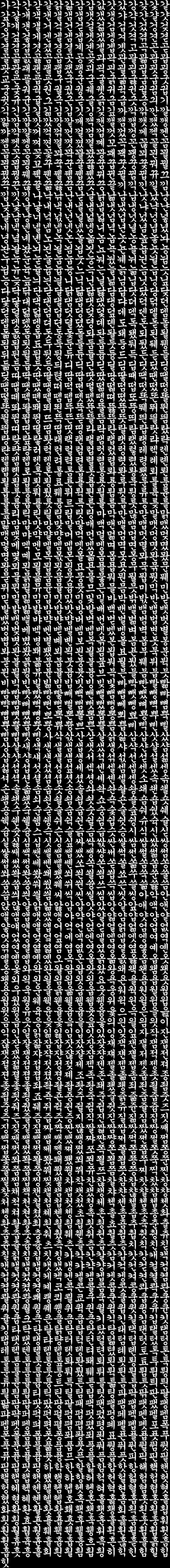
<style>
.page{position:relative;width:170px;height:1568px;background:#000000}
.page>*{position:absolute;margin:0}
.t1{font:10.6px/10.6px "Gungsuh";color:#ffffff}
</style>
<div class="page">
<p class="t1" style="left:0px;top:0px;width:170px;height:1568px">가각간갇갈갉갊감갑값갓갔강갖갗같<br>갚갛개객갠갤갬갭갯갰갱갸갹갼걀걋<br>걍걔걘걜거걱건걷걸걺검겁것겄겅겆<br>겉겊겋게겐겔겜겝겟겠겡겨격겪견겯<br>결겸겹겻겼경곁계곈곌곕곗고곡곤곧<br>골곪곬곯곰곱곳공곶과곽관괄괆괌괍<br>괏광괘괜괠괩괬괭괴괵괸괼굄굅굇굉<br>교굔굘굡굣구국군굳굴굵굶굻굼굽굿<br>궁궂궈궉권궐궜궝궤궷귀귁귄귈귐귑<br>귓규균귤그극근귿글긁금급긋긍긔기<br>긱긴긷길긺김깁깃깅깆깊까깍깎깐깔<br>깖깜깝깟깠깡깥깨깩깬깰깸깹깻깼깽<br>꺄꺅꺌꺼꺽꺾껀껄껌껍껏껐껑께껙껜<br>껨껫껭껴껸껼꼇꼈꼍꼐꼬꼭꼰꼲꼴꼼<br>꼽꼿꽁꽂꽃꽈꽉꽐꽜꽝꽤꽥꽹꾀꾄꾈<br>꾐꾑꾕꾜꾸꾹꾼꿀꿇꿈꿉꿋꿍꿎꿔꿜<br>꿨꿩꿰꿱꿴꿸뀀뀁뀄뀌뀐뀔뀜뀝뀨끄<br>끅끈끊끌끎끓끔끕끗끙끝끼끽낀낄낌<br>낍낏낑나낙낚난낟날낡낢남납낫났낭<br>낮낯낱낳내낵낸낼냄냅냇냈냉냐냑냔<br>냘냠냥너넉넋넌널넒넓넘넙넛넜넝넣<br>네넥넨넬넴넵넷넸넹녀녁년녈념녑녔<br>녕녘녜녠노녹논놀놂놈놉놋농높놓놔<br>놘놜놨뇌뇐뇔뇜뇝뇟뇨뇩뇬뇰뇹뇻뇽<br>누눅눈눋눌눔눕눗눙눠눴눼뉘뉜뉠뉨<br>뉩뉴뉵뉼늄늅늉느늑는늘늙늚늠늡늣<br>능늦늪늬늰늴니닉닌닐닒님닙닛닝닢<br>다닥닦단닫달닭닮닯닳담답닷닸당닺<br>닻닿대댁댄댈댐댑댓댔댕댜더덕덖던<br>덛덜덞덟덤덥덧덩덪덫덮데덱덴델뎀<br>뎁뎃뎄뎅뎌뎐뎔뎠뎡뎨뎬도독돈돋돌<br>돎돐돔돕돗동돛돝돠돤돨돼됐되된될<br>됨됩됫됴두둑둔둘둠둡둣둥둬뒀뒈뒝<br>뒤뒨뒬뒵뒷뒹듀듄듈듐듕드득든듣들<br>듦듬듭듯등듸디딕딘딛딜딤딥딧딨딩<br>딪따딱딴딸텭땀땁땃땄땅땋때땍땐땔<br>땜땝땟땠땡떠떡떤떨떪떫떰떱떳떴떵<br>떻떼떽뗀뗄뗌뗍뗏뗐뗑뗘뗬또똑똔똘<br>똥똬똴뙈뙤뙨뚜뚝뚠뚤뚫뚬뚱뛔뛰뛴<br>뛸뜀뜁뜅뜨뜩뜬뜯뜰뜸뜹뜻띄띈띌띔<br>띕띠띤띨띰띱띳띵라락란랄람랍랏랐<br>랑랒랖랗퇏래랙랜랠램랩랫랬랭랴략<br>랸럇량러럭런럴럼럽럿렀렁렇레렉렌<br>렐렘렙렛렝려력련렬렴렵렷렸령례롄<br>롑롓로록론롤롬롭롯롱롸롼뢍뢨뢰뢴<br>뢸룀룁룃룅료룐룔룝룟룡루룩룬룰룸<br>룹룻룽뤄뤘뤠뤼뤽륀륄륌륏륑류륙륜<br>률륨륩툩륫륭르륵른를름릅릇릉릊릍<br>릎리릭린릴림립릿링마막만많맏말맑<br>맒맘맙맛망맞맡맣매맥맨맬맴맵맷맸<br>맹맺먀먁먈먕머먹먼멀멂멈멉멋멍멎<br>멓메멕멘멜멤멥멧멨멩며멱면멸몃몄<br>명몇몌모목몫몬몰몲몸몹못몽뫄뫈뫘<br>뫙뫼묀묄묍묏묑묘묜묠묩묫무묵묶문<br>묻물묽묾뭄뭅뭇뭉뭍뭏뭐뭔뭘뭡뭣뭬<br>뮈뮌뮐뮤뮨뮬뮴뮷므믄믈믐믓미믹민<br>믿밀밂밈밉밋밌밍및밑바박밖밗반받<br>발밝밞밟밤밥밧방밭배백밴밸뱀뱁뱃<br>뱄뱅뱉뱌뱍뱐뱝버벅번벋벌벎범법벗<br>벙벚베벡벤벧벨벰벱벳벴벵벼벽변별<br>볍볏볐병볕볘볜보복볶본볼봄봅봇봉<br>봐봔봤봬뵀뵈뵉뵌뵐뵘뵙뵤뵨부북분<br>붇불붉붊붐붑붓붕붙붚붜붤붰붸뷔뷕<br>뷘뷜뷩뷰뷴뷸븀븃븅브븍븐블븜븝븟<br>비빅빈빌빎빔빕빗빙빚빛빠빡빤빨빪<br>빰빱빳빴빵빻빼빽뺀뺄뺌뺍뺏뺐뺑뺘<br>뺙뺨뻐뻑뻔뻗뻘뻠뻣뻤뻥뻬뼁뼈뼉뼘<br>뼙뼛뼜뼝뽀뽁뽄뽈뽐뽑뽕뾔뾰뿅뿌뿍<br>뿐뿔뿜뿟뿡쀼쁑쁘쁜쁠쁨쁩삐삑삔삘<br>삠삡삣삥사삭삯산삳살삵삶삼삽삿샀<br>상샅새색샌샐샘샙샛샜생샤샥샨샬샴<br>샵샷샹섀섄섈섐섕서석섞섟선섣설섦<br>섧섬섭섯섰성섶세섹센셀셈셉셋셌셍<br>셔셕션셜셤셥셧셨셩셰셴셸솅소속솎<br>손솔솖솜솝솟송솥솨솩솬솰솽쇄쇈쇌<br>쇔쇗쇘쇠쇤쇨쇰쇱쇳쇼쇽숀숄숌숍숏<br>숑수숙순숟술숨숩숫숭숯숱숲숴쉈쉐<br>쉑쉔쉘쉠쉥쉬쉭쉰쉴쉼쉽쉿슁슈슉슐<br>슘슛슝스슥슨슬슭슴습슷승시식신싣<br>실싫심십싯싱싶싸싹싻싼쌀쌈쌉쌌쌍<br>쌓쌔쌕쌘쌜쌤쌥쌨쌩썅써썩썬썰썲썸<br>썹썼썽쎄쎈쎌쏀쏘쏙쏜쏟쏠쏢쏨쏩쏭<br>쏴쏵쏸쐈쐐쐤쐬쐰쐴쐼쐽쑈쑤쑥쑨쑬<br>쑴쑵쑹쒀쒔쒜쒸쒼쓩쓰쓱쓴쓸쓺쓿씀<br>씁씌씐씔씜씨씩씬씰씸씹씻씽아악안<br>앉않알앍앎앓암압앗았앙앝앞애액앤<br>앨앰앱앳앴앵야약얀얄얇얌얍얏양얕<br>얗얘얜얠얩어억언얹얻얼얽얾엄업없<br>엇었엉엊엌엎에엑엔엘엠엡엣엥여역<br>엮연열엶엷염엽엾엿였영옅옆옇예옌<br>옐옘옙옛옜오옥온올옭옮옰옳옴옵옷<br>옹옻와왁완왈왐왑왓왔왕왜왝왠왬왯<br>왱외왹왼욀욈욉욋욍요욕욘욜욤욥욧<br>용우욱운울욹욺움웁웃웅워웍원월웜<br>웝웠웡웨웩웬웰웸웹웽위윅윈윌윔윕<br>윗윙유육윤율윰윱윳융윷으윽은을읊<br>음읍읏응읒읓읔읕읖읗의읜읠읨읫이<br>익인일읽읾잃임입잇있잉잊잎자작잔<br>잖잗잘잚잠잡잣잤장잦재잭잰잴잼잽<br>잿쟀쟁쟈쟉쟌쟎쟐쟘쟝쟤쟨쟬저적전<br>절젊점접젓정젖제젝젠젤젬젭젯젱져<br>젼졀졈졉졌졍졔조족존졸졺좀좁좃종<br>좆좇좋좌좍좔좝좟좡좨좼좽죄죈죌죔<br>죕죗죙죠죡죤죵주죽준줄줅줆줌줍줏<br>중줘줬줴쥐쥑쥔쥘쥠쥡쥣쥬쥰쥴쥼즈<br>즉즌즐즘즙즛증지직진짇질짊짐집짓<br>징짖짙짚짜짝짠짢짤짧짬짭짯짰짱째<br>짹짼쨀쨈쨉쨋쨌쨍쨔쨘쨩쩌쩍쩐쩔쩜<br>쩝쩟쩠쩡쩨쩽쪄쪘쪼쪽쫀쫄쫌쫍쫏쫑<br>쫓쫘쫙쫠쫬쫴쬈쬐쬔쬘쬠쬡쭁쭈쭉쭌<br>쭐쭘쭙쭝쭤쭸쭹쮜쮸쯔쯤쯧쯩찌찍찐<br>찔찜찝찡찢찧차착찬찮찰참찹찻찼창<br>찾채책챈챌챔챕챗챘챙챠챤챦챨챰챵<br>처척천철첨첩첫첬청체첵첸첼쳄쳅쳇<br>쳉쳐쳔쳤쳬쳰촁초촉촌촐촘촙촛총촤<br>촨촬촹최쵠쵤쵬쵭쵯쵱쵸춈추축춘출<br>춤춥춧충춰췄췌췐취췬췰췸췹췻췽츄<br>츈츌츔츙츠측츤츨츰츱츳층치칙친칟<br>칠칡침칩칫칭카칵칸칼캄캅캇캉캐캑<br>캔캘캠캡캣캤캥캬캭컁커컥컨컫컬컴<br>컵컷컸컹케켁켄켈켐켑켓켕켜켠켤켬<br>켭켯켰켱켸코콕콘콜콤콥콧콩콰콱콴<br>콸쾀쾅쾌쾡쾨쾰쿄쿠쿡쿤쿨쿰쿱쿳쿵<br>쿼퀀퀄퀑퀘퀭퀴퀵퀸퀼큄큅큇큉큐큔<br>큘큠크큭큰클큼큽킁키킥킨킬킴킵킷<br>킹타탁탄탈탉탐탑탓탔탕태택탠탤탬<br>탭탯탰탱탸턍터턱턴털턺텀텁텃텄텅<br>테텍텐텔템텝텟텡텨텬텼톄톈토톡톤<br>톨톰톱톳통톺톼퇀퇘퇴퇸툇툉툐투툭<br>툰툴툼툽툿퉁퉈퉜퉤튀튁튄튈튐튑튕<br>튜튠튤튬튱트특튼튿틀틂틈틉틋틔틘<br>틜틤틥티틱틴틸팀팁팃팅파팍팎판팔<br>팖팜팝팟팠팡팥패팩팬팰팸팹팻팼팽<br>퍄퍅퍼퍽펀펄펌펍펏펐펑페펙펜펠펨<br>펩펫펭펴편펼폄폅폈평폐폘폡폣포폭<br>폰폴폼폽폿퐁퐈퐝푀푄표푠푤푭푯푸<br>푹푼푿풀풂품풉풋풍풔풩퓌퓐퓔퓜퓟<br>퓨퓬퓰퓸퓻퓽프픈플픔픕픗피픽핀필<br>핌핍핏핑하학한할핥함합핫항해핵핸<br>핼햄햅햇했행햐향허헉헌헐헒험헙헛<br>헝헤헥헨헬헴헵헷헹혀혁현혈혐협혓<br>혔형혜혠혤혭호혹혼홀홅홈홉홋홍홑<br>화확환활홧황홰홱홴횃횅회획횐횔횝<br>횟횡효횬횰횹횻후훅훈훌훑훔훗훙훠<br>훤훨훰훵훼훽휀휄휑휘휙휜휠휨휩휫<br>휭휴휵휸휼흄흅흉흐흑흔흖흗흘흙흠<br>흡흣흥흩희흰흴흼흽힁히힉힌힘힐힙<br>힛</p>
</div>
